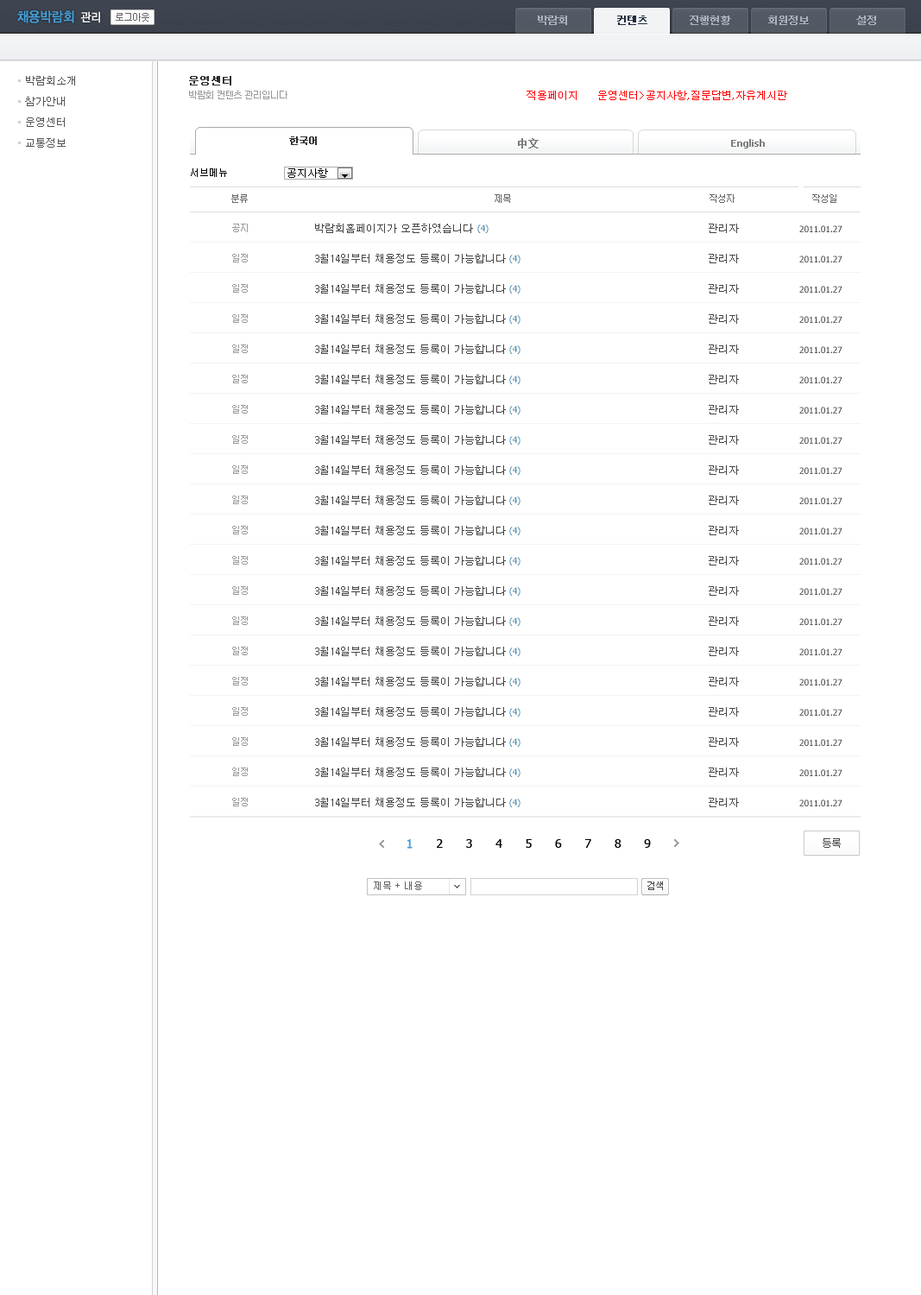
<style>
.page{position:relative;width:921px;height:1295px;background:#ffffff}
.page>*{position:absolute;margin:0}
.t1{font:13.8px "YDIYGO130-KSCpc-EUC-H";letter-spacing:-0.1em;color:#469fd9;font-weight:bold;scale:0.9 1}
.t2{font:12.1px "YDIYGO130-KSCpc-EUC-H";letter-spacing:-0.1em;color:#f0f0f0;font-weight:bold;scale:0.9 1}
.t3{font:10.4px "Dotum";letter-spacing:-0.1em;color:#aab1be;font-weight:bold}
.t4{font:10.4px "Dotum";letter-spacing:-0.1em;color:#212e40;font-weight:bold}
.t5{font:10.4px/20.7px "Dotum";color:#535353}
.t6{font:10.4px "Dotum";color:#2e2e2e;font-weight:bold}
.t7{font:9.5px "Dotum";letter-spacing:-0.1em;color:#999999}
.t8{font:10.4px "Dotum";color:#ff0000}
.t9{font:9.5px "Dotum";letter-spacing:-0.1em;color:#333333;font-weight:bold}
.t10{font:10.4px "SimSun";color:#7d7d7d;font-weight:bold}
.t11{font:9.5px "Tahoma";color:#7d7d7d;font-weight:bold}
.t12{font:9.5px "Dotum";letter-spacing:-0.1em;color:#666666}
.t13{font:10.4px "Dotum";color:#454545}
.t14{font:8.6px "Tahoma"}
.t15{font:8.6px "Tahoma";color:#454545}
.t16{font:12.1px "Tahoma";letter-spacing:0.8em;color:#000000}
.t17{font:12.1px "Tahoma";letter-spacing:0.8em;color:#469ed9;font-weight:bold}
.t18{font:10.4px "Dotum";letter-spacing:-0.1em;color:#454545}
</style>
<div class="page">
<p class="t1" style="left:17px;top:10px;width:57px;height:13px">채용박람회</p>
<p class="t2" style="left:80px;top:11px;width:20px;height:12px">관리</p>
<p class="t3" style="left:538px;top:16px;width:29px;height:9px">박람회</p>
<p class="t4" style="left:617px;top:16px;width:30px;height:9px">컨텐츠</p>
<p class="t3" style="left:690px;top:16px;width:41px;height:9px">진행현황</p>
<p class="t3" style="left:768px;top:16px;width:41px;height:9px">회원정보</p>
<p class="t3" style="left:856px;top:16px;width:20px;height:9px">설정</p>
<p class="t5" style="left:25px;top:76px;width:50px;height:72px">박람회소개<br>참가안내<br>운영센터<br>교통정보</p>
<p class="t6" style="left:189px;top:76px;width:42px;height:9px">운영센터</p>
<p class="t7" style="left:189px;top:91px;width:98px;height:8px">박람회 컨텐츠 관리입니다</p>
<p class="t8" style="left:527px;top:91px;width:50px;height:9px">적용페이지</p>
<p class="t8" style="left:598px;top:91px;width:189px;height:9px">운영센터&gt;공지사항,질문답변,자유게시판</p>
<p class="t9" style="left:289px;top:136px;width:28px;height:9px">한국어</p>
<p class="t10" style="left:518px;top:138px;width:21px;height:10px">中文</p>
<p class="t11" style="left:731px;top:139px;width:34px;height:9px">English</p>
<p class="t12" style="left:231px;top:194px;width:17px;height:9px">분류</p>
<p class="t12" style="left:495px;top:194px;width:16px;height:9px">제목</p>
<p class="t12" style="left:710px;top:194px;width:25px;height:9px">작성자</p>
<p class="t12" style="left:812px;top:194px;width:24px;height:9px">작성일</p>
<p class="t7" style="left:232px;top:224px;width:16px;height:8px">공지</p>
<p class="t13" style="left:315px;top:224px;width:158px;height:9px">박람회홈페이지가 오픈하였습니다</p>
<p class="t14" style="left:477px;top:224px;width:12px;height:9px">(4)</p>
<p class="t13" style="left:709px;top:224px;width:30px;height:9px">관리자</p>
<p class="t15" style="left:799px;top:225px;width:43px;height:7px">2011.01.27</p>
<p class="t16" style="left:407px;top:839px;width:244px;height:9px"><span class="t17">1</span> 2 3 4 5 6 7 8 9</p>
<p class="t18" style="left:823px;top:838px;width:18px;height:10px">등록</p>
</div>
